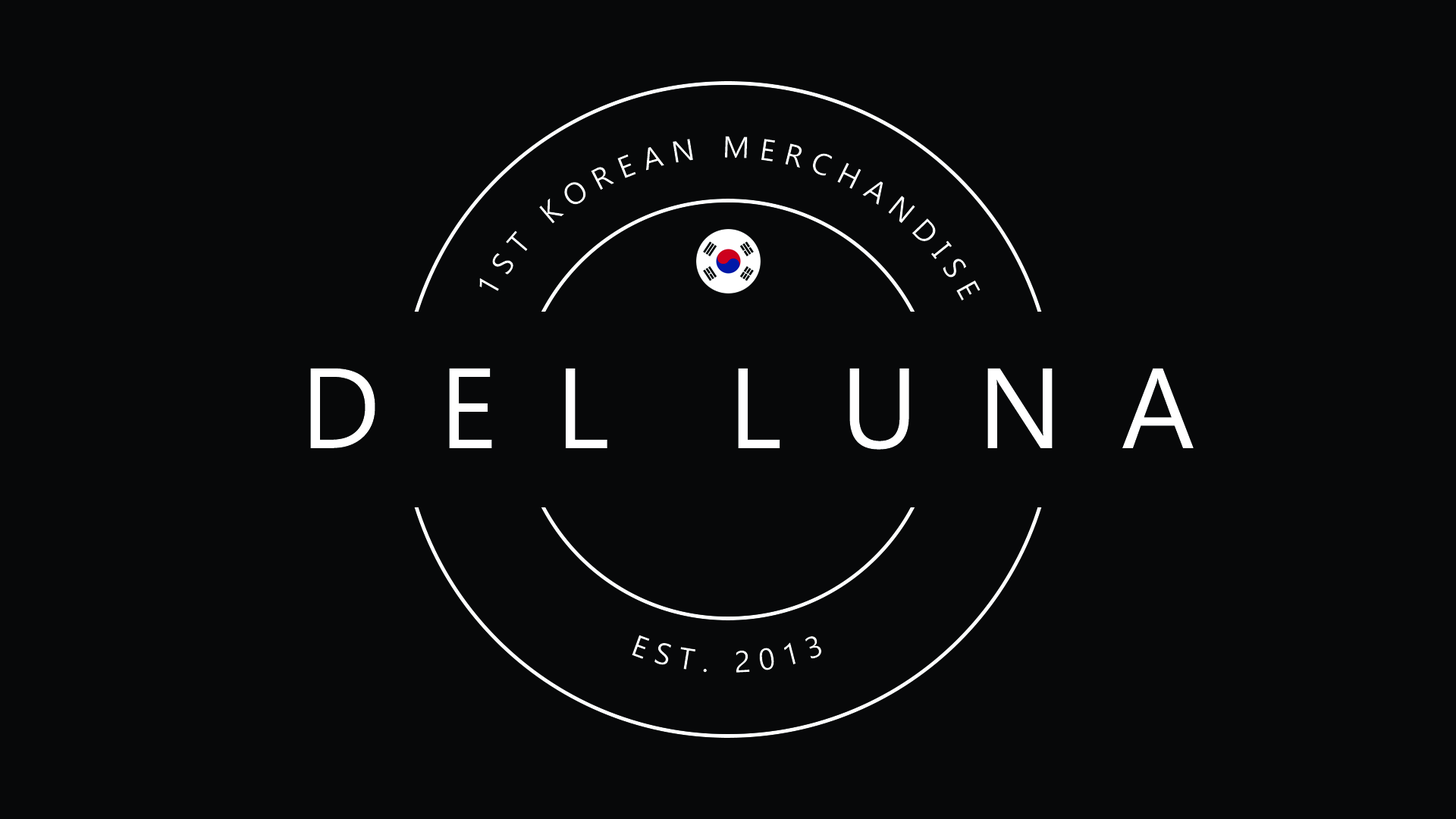
<style>
.page{position:relative;width:1456px;height:819px;background:#070809}
.page>*{position:absolute;margin:0}
.t1{font:30.3px "Gadugi";letter-spacing:0.3em;color:#ffffff}
.t2{font:113.7px "Gadugi";letter-spacing:-0.01em;color:#ffffff}
</style>
<div class="page">
<p class="t1" style="left:479px;top:136px;width:502px;height:165px;text-align:center">1ST KOREAN MERCHANDISE</p>
<p class="t2" style="left:310px;top:368px;width:884px;height:82px">D  E  L    L  U  N  A</p>
<p class="t1" style="left:632px;top:635px;width:189px;height:38px">EST. 2013</p>
</div>
